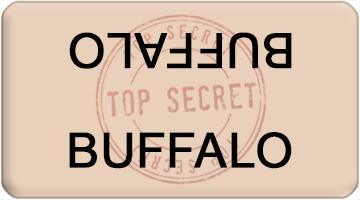
<style>
.page{position:relative;width:360px;height:200px;background:#e8d0bb}
.page>*{position:absolute;margin:0}
.t1{font:48px "ArialMT";color:#000000;font-weight:bold}
</style>
<div class="page">
<p class="t1" style="left:69px;top:32px;width:223px;height:37px;rotate:180deg">BUFFALO</p>
<p class="t1" style="left:69px;top:132px;width:223px;height:37px">BUFFALO</p>
</div>
